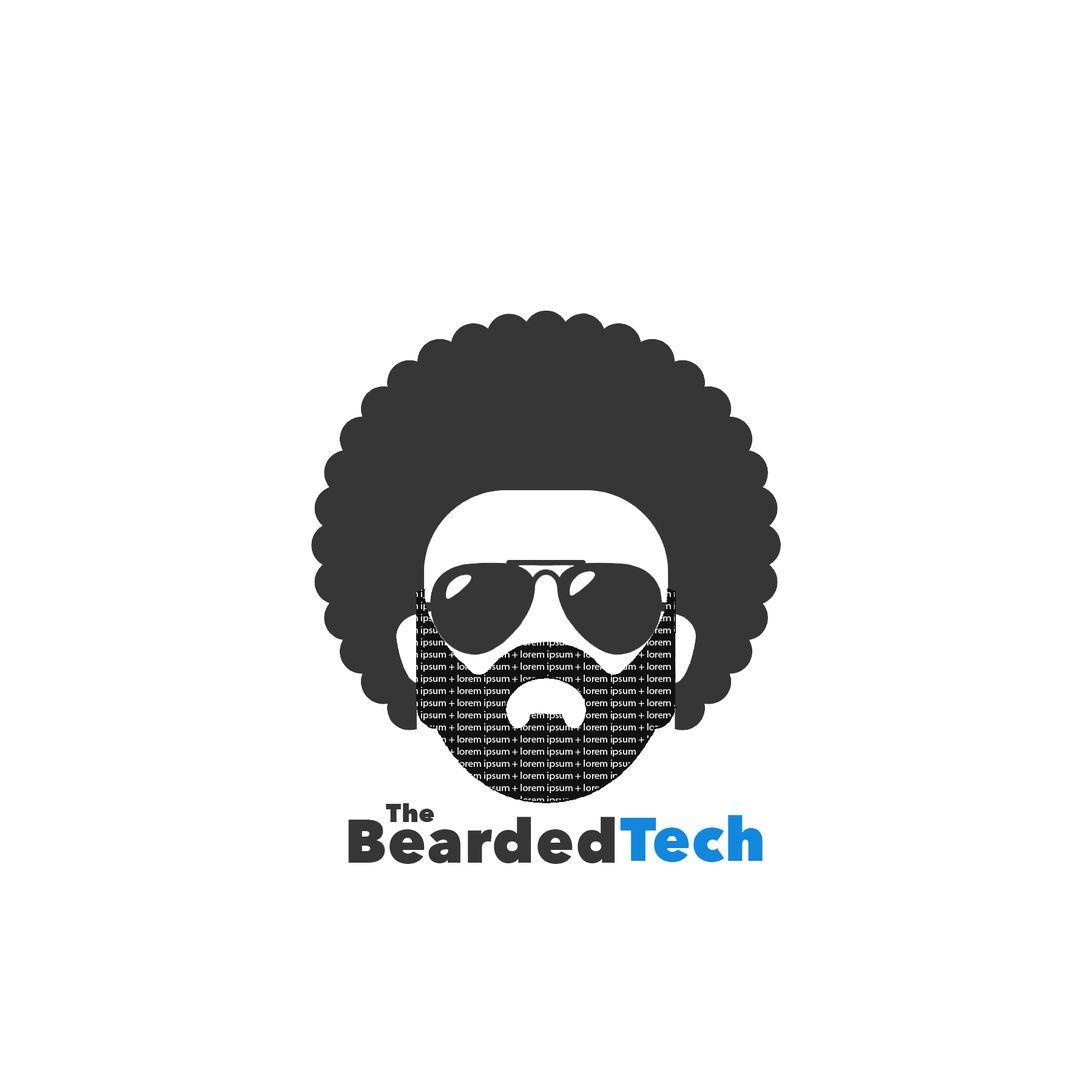
<style>
.page{position:relative;width:1092px;height:1092px;background:#ffffff}
.page>*{position:absolute;margin:0}
.t1{font:25.3px "AvenirNext-Heavy";letter-spacing:0.025em;color:#363636}
.t2{font:60.7px "AvenirNext-Heavy";letter-spacing:0.025em;color:#363636}
.t3{font:60.7px "AvenirNext-Heavy";letter-spacing:0.025em;color:#1187de}
</style>
<div class="page">
<p class="t1" style="left:386px;top:803px;width:48px;height:19px">The</p>
<p class="t2" style="left:348px;top:817px;width:267px;height:47px">Bearded</p>
<p class="t3" style="left:620px;top:815px;width:143px;height:47px">Tech</p>
</div>
